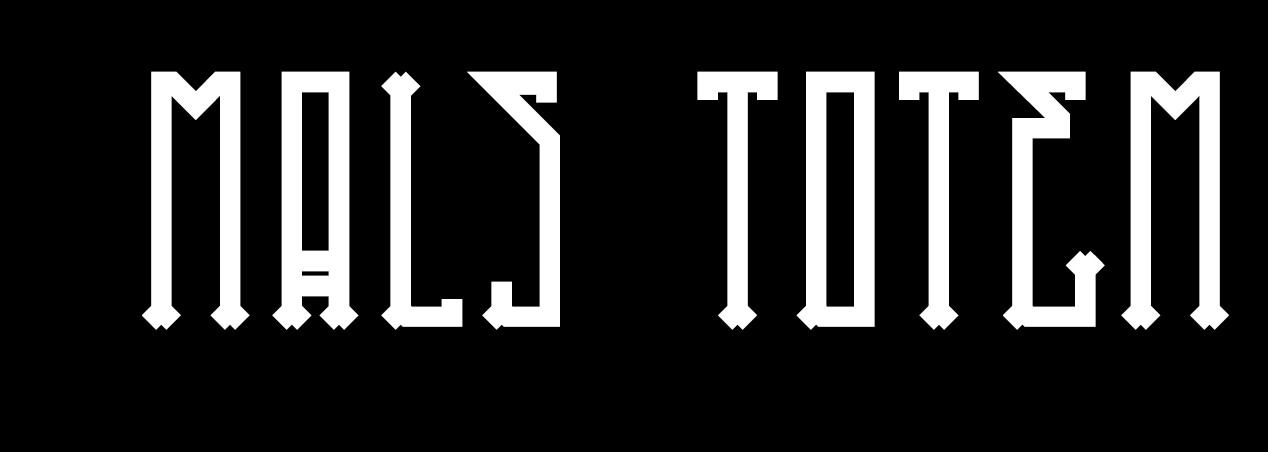
<style>
.page{position:relative;width:1268px;height:452px;background:#000000}
.page>*{position:absolute;margin:0}
.t1{font:257.5px "HFraternal-Bold";letter-spacing:0.06em;color:#ffffff}
</style>
<div class="page">
<p class="t1" style="left:142px;top:71px;width:1087px;height:259px">MALS totem</p>
</div>
